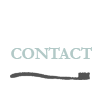
<style>
.page{position:relative;width:100px;height:107px;background:#ffffff}
.page>*{position:absolute;margin:0}
.t1{font:16.5px "Garamond-Bold";color:#b2c9c7}
</style>
<div class="page">
<p class="t1" style="left:11px;top:47px;width:81px;height:12px">CONTACT</p>
</div>
